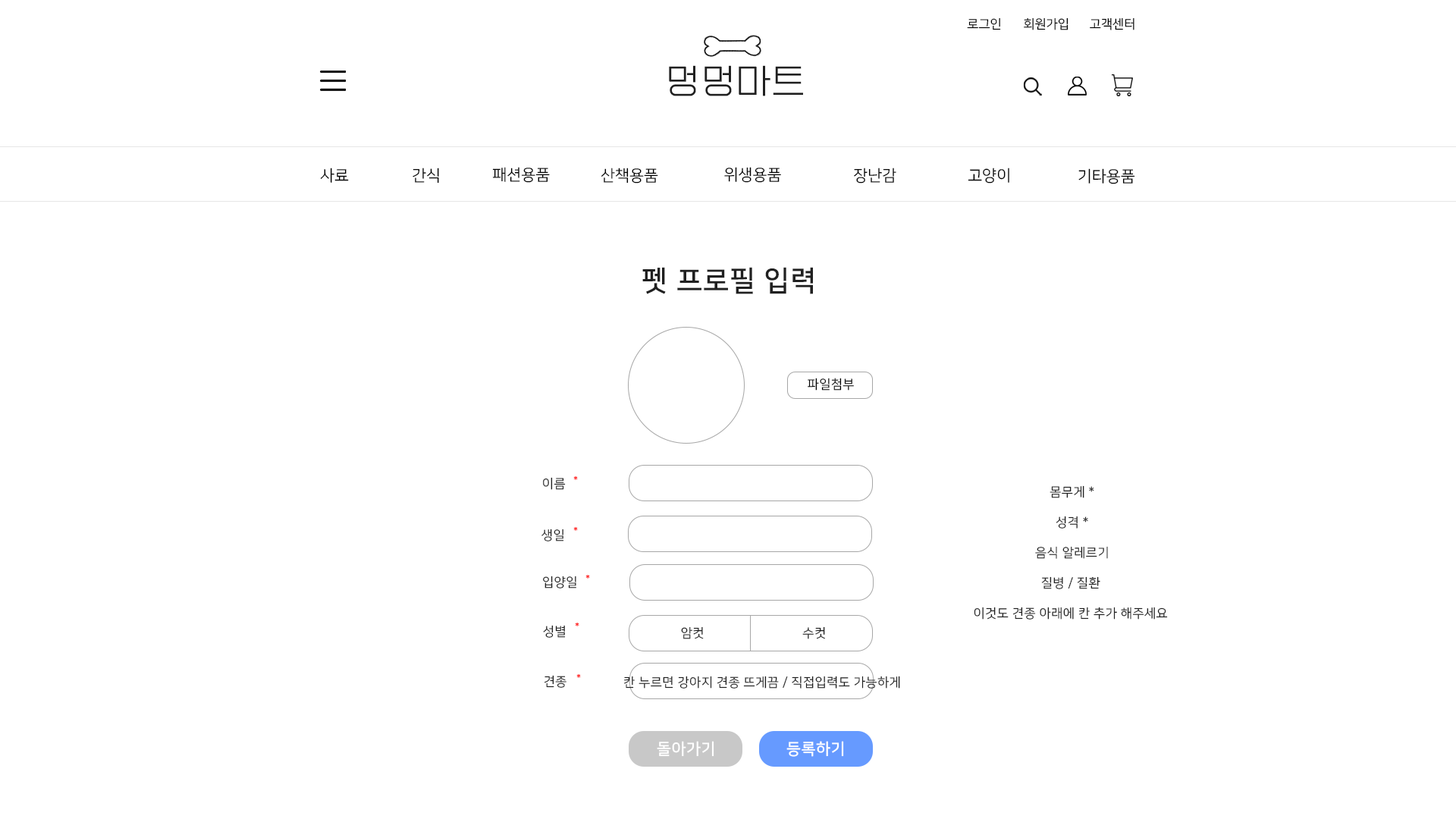
<style>
.page{position:relative;width:1456px;height:819px;background:#ffffff}
.page>*{position:absolute;margin:0}
.t1{font:12.6px "NanumSquareR";color:#000000}
.t2{font:34.8px "EF_watermelonSalad";letter-spacing:0.025em;color:#202020}
.t3{font:15.8px "NanumSquareR";color:#000000}
.t4{font:28.4px "NanumSquareB";letter-spacing:0.025em;color:#202020}
.t5{font:12.6px "NanumSquareR";letter-spacing:0.025em;color:#000000}
.t6{font:12.6px "NanumSquareR";letter-spacing:0.025em;color:#202020}
.t7{font:9.5px "NanumSquareR";letter-spacing:0.025em}
.t8{font:15.8px "NanumSquareB";letter-spacing:0.025em;color:#ffffff}
</style>
<div class="page">
<p class="t1" style="left:967px;top:17px;width:34px;height:13px">로그인</p>
<p class="t1" style="left:1024px;top:17px;width:44px;height:13px">회원가입</p>
<p class="t1" style="left:1090px;top:17px;width:44px;height:13px">고객센터</p>
<p class="t2" style="left:669px;top:65px;width:134px;height:31px">멍멍마트</p>
<p class="t3" style="left:320px;top:168px;width:29px;height:15px">사료</p>
<p class="t3" style="left:413px;top:168px;width:26px;height:16px">간식</p>
<p class="t3" style="left:492px;top:167px;width:58px;height:16px">패션용품</p>
<p class="t3" style="left:601px;top:168px;width:57px;height:16px">산책용품</p>
<p class="t3" style="left:724px;top:167px;width:57px;height:16px">위생용품</p>
<p class="t3" style="left:854px;top:168px;width:42px;height:16px">장난감</p>
<p class="t3" style="left:968px;top:168px;width:41px;height:16px">고양이</p>
<p class="t3" style="left:1078px;top:168px;width:57px;height:16px">기타용품</p>
<p class="t4" style="left:642px;top:267px;width:171px;height:27px">펫 프로필 입력</p>
<p class="t5" style="left:808px;top:378px;width:46px;height:13px">파일첨부</p>
<p class="t6" style="left:543px;top:477px;width:23px;height:13px">이름</p>
<p class="t7" style="left:573px;top:475px;width:5px;height:5px">*</p>
<p class="t6" style="left:974px;top:485px;width:194px;height:135px;text-align:center">몸무게 *<br><br>성격 *<br><br>음식 알레르기<br><br>질병 / 질환 <br><br>이것도 견종 아래에 칸 추가 해주세요</p>
<p class="t6" style="left:541px;top:529px;width:23px;height:12px">생일</p>
<p class="t7" style="left:573px;top:526px;width:5px;height:5px">*</p>
<p class="t6" style="left:543px;top:576px;width:33px;height:12px">입양일</p>
<p class="t7" style="left:585px;top:574px;width:5px;height:5px">*</p>
<p class="t6" style="left:543px;top:625px;width:23px;height:13px">성별</p>
<p class="t7" style="left:575px;top:622px;width:4px;height:4px">*</p>
<p class="t6" style="left:681px;top:626px;width:23px;height:13px">암컷</p>
<p class="t6" style="left:802px;top:626px;width:23px;height:13px">수컷</p>
<p class="t6" style="left:544px;top:675px;width:22px;height:13px">견종</p>
<p class="t7" style="left:576px;top:673px;width:5px;height:5px">*</p>
<p class="t6" style="left:624px;top:676px;width:276px;height:13px">칸 누르면 강아지 견종 뜨게끔 / 직접입력도 가능하게</p>
<p class="t8" style="left:657px;top:741px;width:57px;height:16px">돌아가기</p>
<p class="t8" style="left:786px;top:741px;width:58px;height:16px">등록하기</p>
</div>
